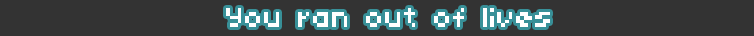
<style>
.page{position:relative;width:754px;height:36px;background:#333333}
.page>*{position:absolute;margin:0}
.t1{font:30px "04b03";color:#ffffff}
</style>
<div class="page">
<p class="t1" style="left:226px;top:8px;width:324px;height:19px">You ran out of lives</p>
</div>
